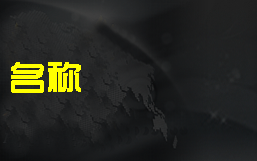
<style>
.page{position:relative;width:257px;height:161px}
.page>*{position:absolute;margin:0}
.t1{font:36px "TRENDS";color:#ffff00;font-weight:bold}
</style>
<div class="page">
<p class="t1" style="left:11px;top:62px;width:70px;height:31px">名称</p>
</div>
